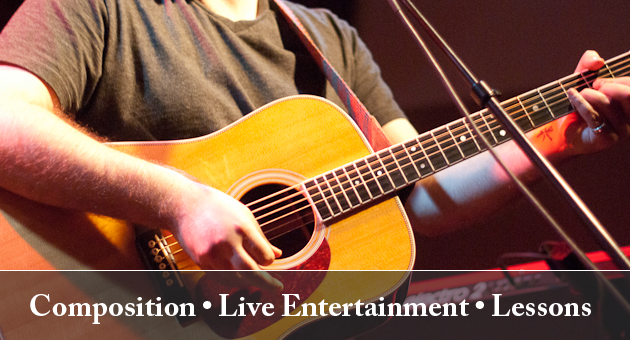
<style>
.page{position:relative;width:630px;height:340px}
.page>*{position:absolute;margin:0}
.t1{font:30px "ACaslonPro-Bold";color:#ffffff}
</style>
<div class="page">
<p class="t1" style="left:30px;top:294px;width:561px;height:30px">Composition • Live Entertainment • Lessons</p>
</div>
